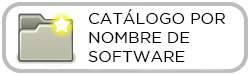
<style>
.page{position:relative;width:250px;height:75px;background:#ffffff}
.page>*{position:absolute;margin:0}
.t1{font:16px "GothamBook";color:#000000}
</style>
<div class="page">
<p class="t1" style="left:88px;top:9px;width:138px;height:53px">CATÁLOGO POR<br>NOMBRE DE<br>SOFTWARE</p>
</div>
